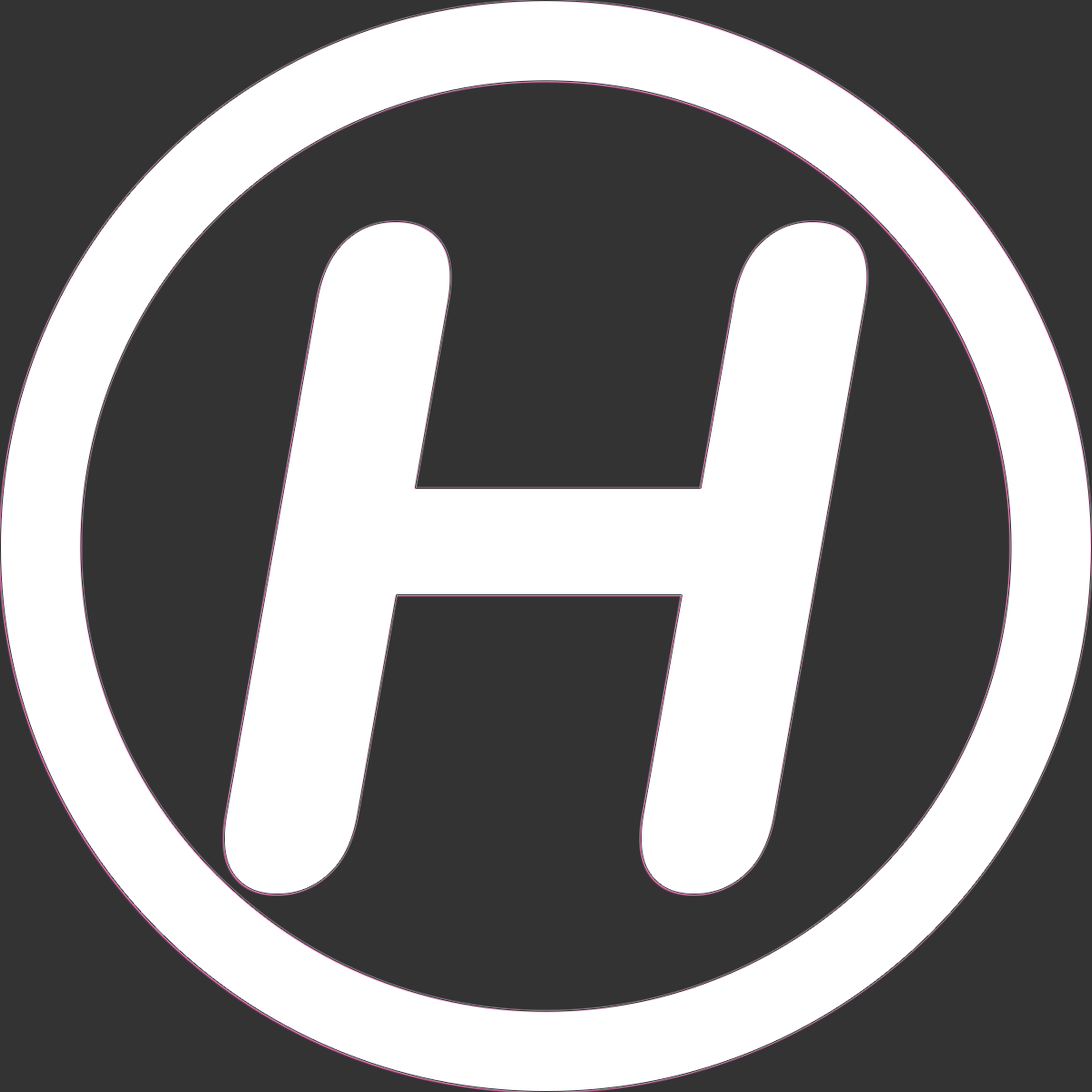
<style>
.page{position:relative;width:1092px;height:1092px;background:#333333}
.page>*{position:absolute;margin:0}
.t1{font:910px "ArialRoundedMTBold";color:#ffffff;font-style:italic}
</style>
<div class="page">
<p class="t1" style="left:224px;top:221px;width:644px;height:674px">H</p>
</div>
